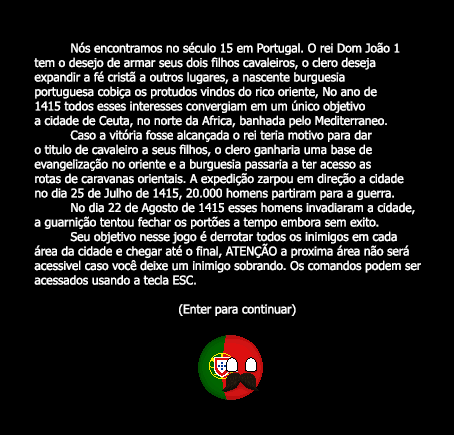
<style>
.page{position:relative;width:454px;height:435px;background:#000000}
.page>*{position:absolute;margin:0}
.t1{font:12.1px "Tahoma";color:#ffffff}
</style>
<div class="page">
<p class="t1" style="left:34px;top:42px;width:387px;height:274px">Nós encontramos no século 15 em Portugal. O rei Dom João 1<br>tem o desejo de armar seus dois filhos cavaleiros, o clero deseja<br>expandir a fé cristã a outros lugares, a nascente burguesia <br>portuguesa cobiça os protudos vindos do rico oriente, No ano de<br>1415 todos esses interesses convergiam em um único objetivo <br>a cidade de Ceuta, no norte da Africa, banhada pelo Mediterraneo.<br> Caso a vitória fosse alcançada o rei teria motivo para dar <br>o titulo de cavaleiro a seus filhos, o clero ganharia uma base de<br>evangelização no oriente e a burguesia passaria a ter acesso as<br>rotas de caravanas orientais. A expedição zarpou em direção a cidade<br>no dia 25 de Julho de 1415, 20.000 homens partiram para a guerra.<br> No dia 22 de Agosto de 1415 esses homens invadiaram a cidade,<br>a guarnição tentou fechar os portões a tempo embora sem exito. <br> Seu objetivo nesse jogo é derrotar todos os inimigos em cada <br>área da cidade e chegar até o final, ATENÇÃO a proxima área não será<br>acessivel caso você deixe um inimigo sobrando. Os comandos podem ser<br>acessados usando a tecla ESC.<br><br>    (Enter para continuar)</p>
</div>
